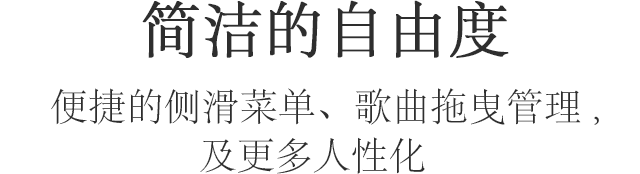
<style>
.page{position:relative;width:640px;height:174px;background:#ffffff}
.page>*{position:absolute;margin:0}
.t1{font:60px "AdobeSongStd-Light";color:#2e2e2e;font-weight:bold}
.t2{font:38px "AdobeSongStd-Light";color:#2e2e2e}
</style>
<div class="page">
<p class="t1" style="left:142px;top:0px;width:367px;height:58px">简洁的自由度</p>
<p class="t2" style="left:51px;top:88px;width:548px;height:37px">便捷的侧滑菜单、歌曲拖曳管理,</p>
<p class="t2" style="left:200px;top:137px;width:225px;height:37px">及更多人性化</p>
</div>
